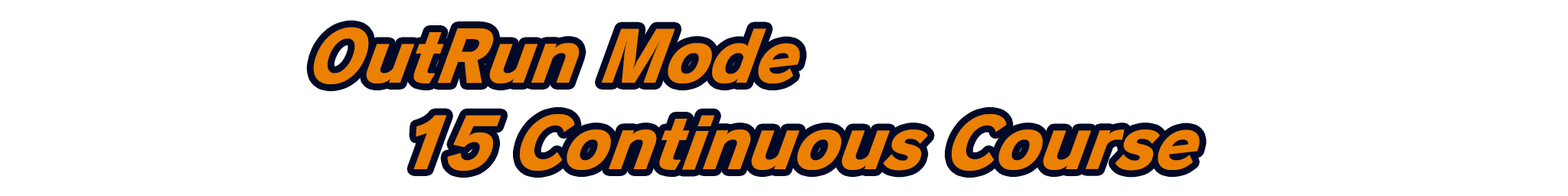
<style>
.page{position:relative;width:1568px;height:196px;background:#ffffff}
.page>*{position:absolute;margin:0}
.t1{font:73.5px "RodinPro-EB";letter-spacing:-0.015em;color:#ec8002;scale:0.94 1}
</style>
<div class="page">
<p class="t1" style="left:313px;top:27px;width:487px;height:57px">OutRun Mode</p>
<p class="t1" style="left:413px;top:113px;width:787px;height:59px">15 Continuous Course</p>
</div>
